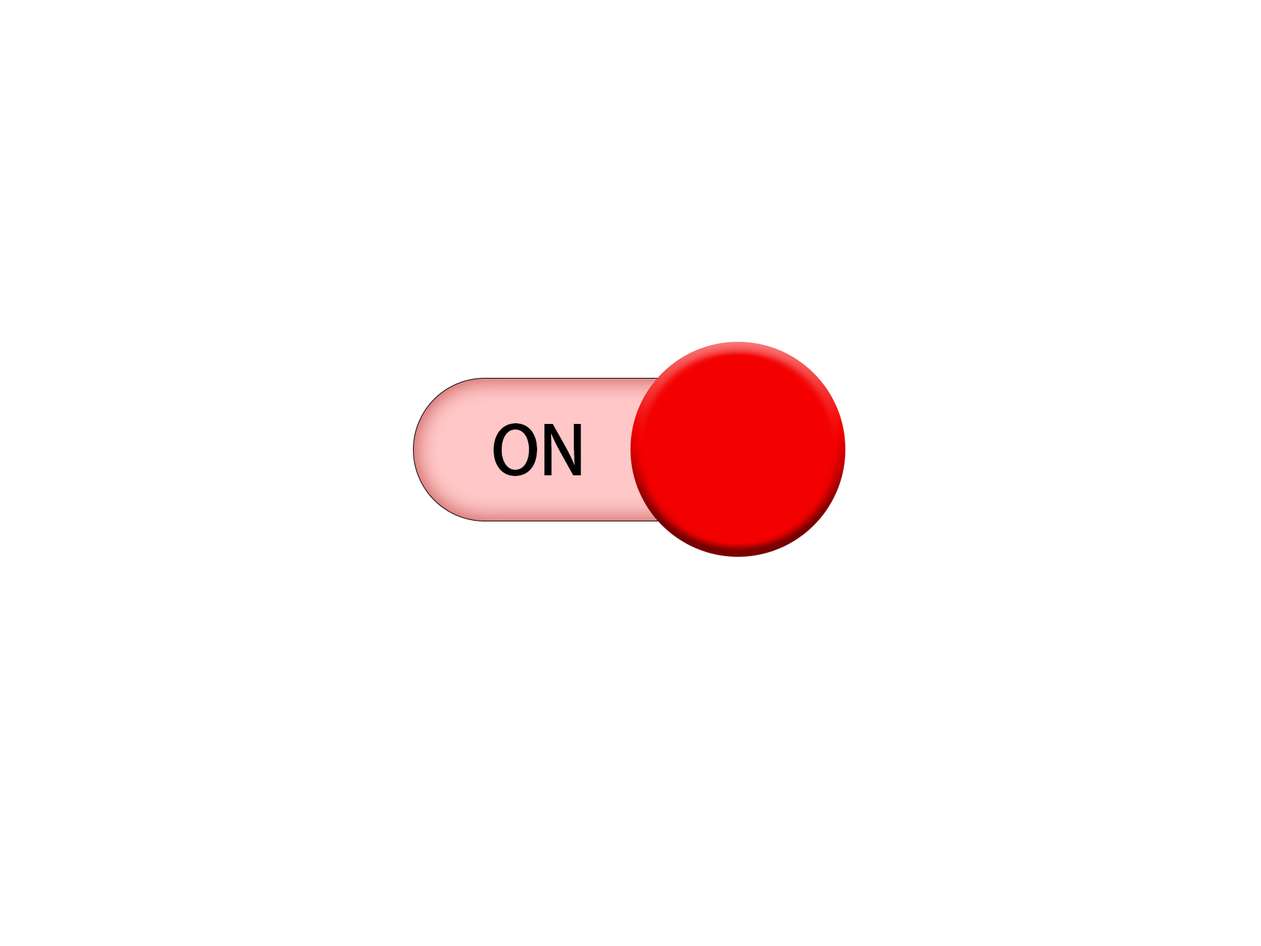
<style>
.page{position:relative;width:1261px;height:946px;background:#ffffff}
.page>*{position:absolute;margin:0}
.t1{font:66.7px "AdobeHeitiStd-Regular";color:#000000}
</style>
<div class="page">
<p class="t1" style="left:493px;top:423px;width:88px;height:53px">ON</p>
</div>
